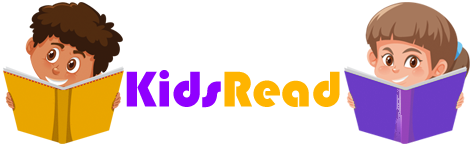
<style>
.page{position:relative;width:473px;height:145px;background:#ffffff}
.page>*{position:absolute;margin:0}
.t1{font:52.1px "Bauhaus93";color:#9000ff}
.t2{font:52.1px "Bauhaus93";color:#ffb400}
</style>
<div class="page">
<p class="t1" style="left:126px;top:70px;width:214px;height:38px">Kids<span class="t2">Read</span></p>
</div>
